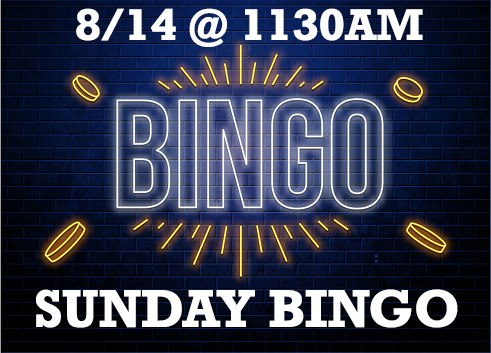
<style>
.page{position:relative;width:491px;height:353px}
.page>*{position:absolute;margin:0}
.t1{font:41.7px "Rockwell-Bold";color:#ffffff}
.t2{font:50px "Rockwell-Bold";color:#ffffff}
</style>
<div class="page">
<p class="t1" style="left:76px;top:8px;width:347px;height:39px">8/14 @ 1130AM</p>
<p class="t2" style="left:36px;top:289px;width:422px;height:39px">SUNDAY BINGO</p>
</div>
